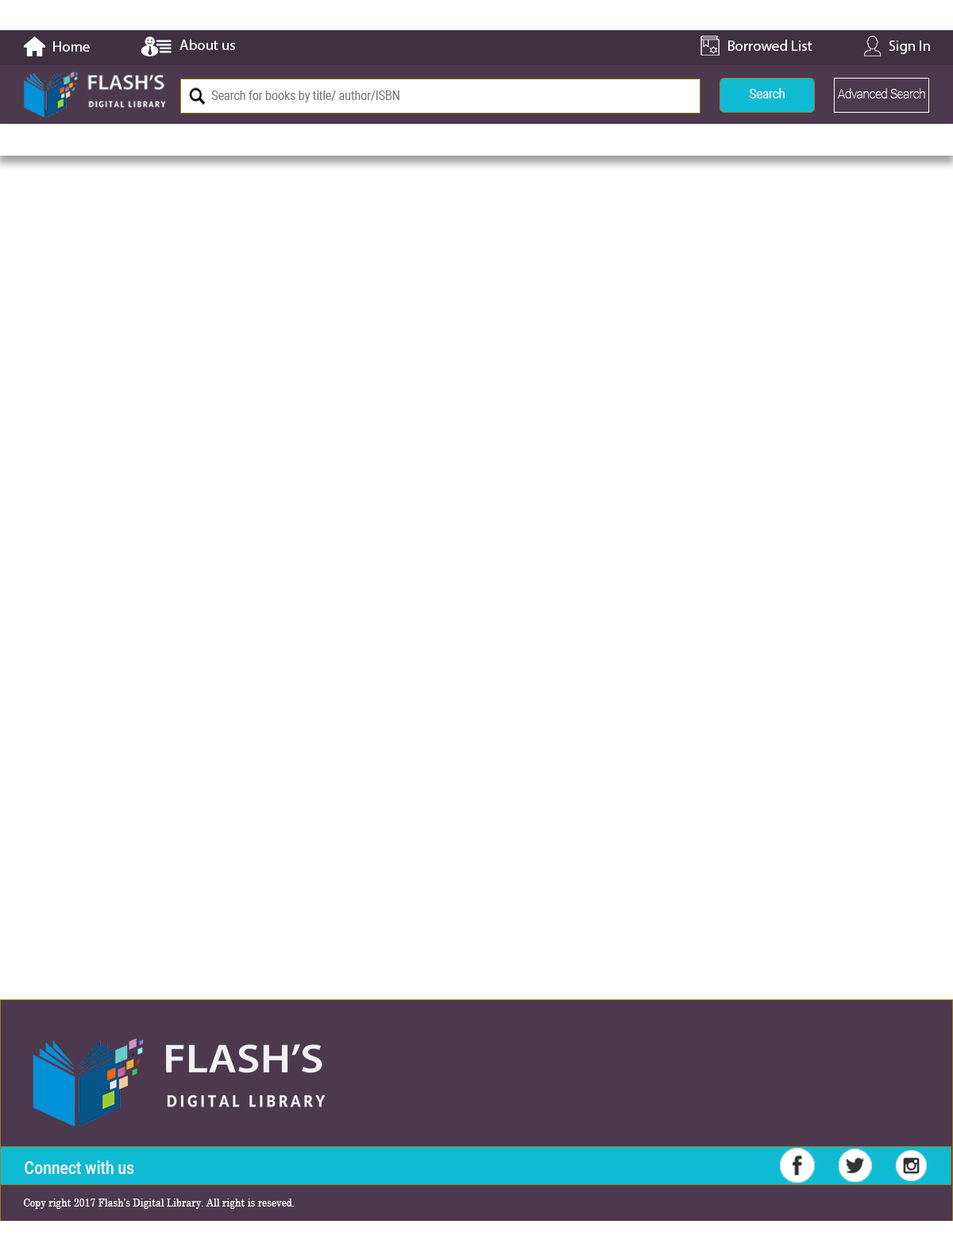
<style>
.page{position:relative;width:953px;height:1251px;background:#ffffff}
.page>*{position:absolute;margin:0}
.t1{font:14.9px "MyriadPro-Regular";color:#ffffff}
.t2{font:13.2px "Roboto-Regular";color:#ffffff;scale:0.88 1}
.t3{font:13.2px "Roboto-Thin";color:#ffffff;scale:0.88 1}
.t4{font:12.6px "Roboto-Regular";color:#797474;scale:0.88 1}
.t5{font:17.2px "Roboto-Medium";color:#ffffff;scale:0.89 1}
.t6{font:10.9px "CenturySchoolbook";color:#ffffff;scale:0.89 1}
</style>
<div class="page">
<p class="t1" style="left:53px;top:41px;width:37px;height:11px">Home</p>
<p class="t1" style="left:179px;top:39px;width:56px;height:11px">About us</p>
<p class="t1" style="left:728px;top:40px;width:84px;height:11px">Borrowed List</p>
<p class="t1" style="left:889px;top:40px;width:41px;height:14px">Sign In</p>
<p class="t2" style="left:750px;top:88px;width:35px;height:10px">Search</p>
<p class="t3" style="left:838px;top:88px;width:87px;height:10px">Advanced Search</p>
<p class="t4" style="left:211px;top:91px;width:188px;height:11px">Search for books by title/ author/ISBN</p>
<p class="t5" style="left:25px;top:1161px;width:109px;height:13px">Connect with us</p>
<p class="t6" style="left:24px;top:1199px;width:271px;height:10px">Copy right 2017 Flash’s Digital Library. All right is reseved.</p>
</div>
